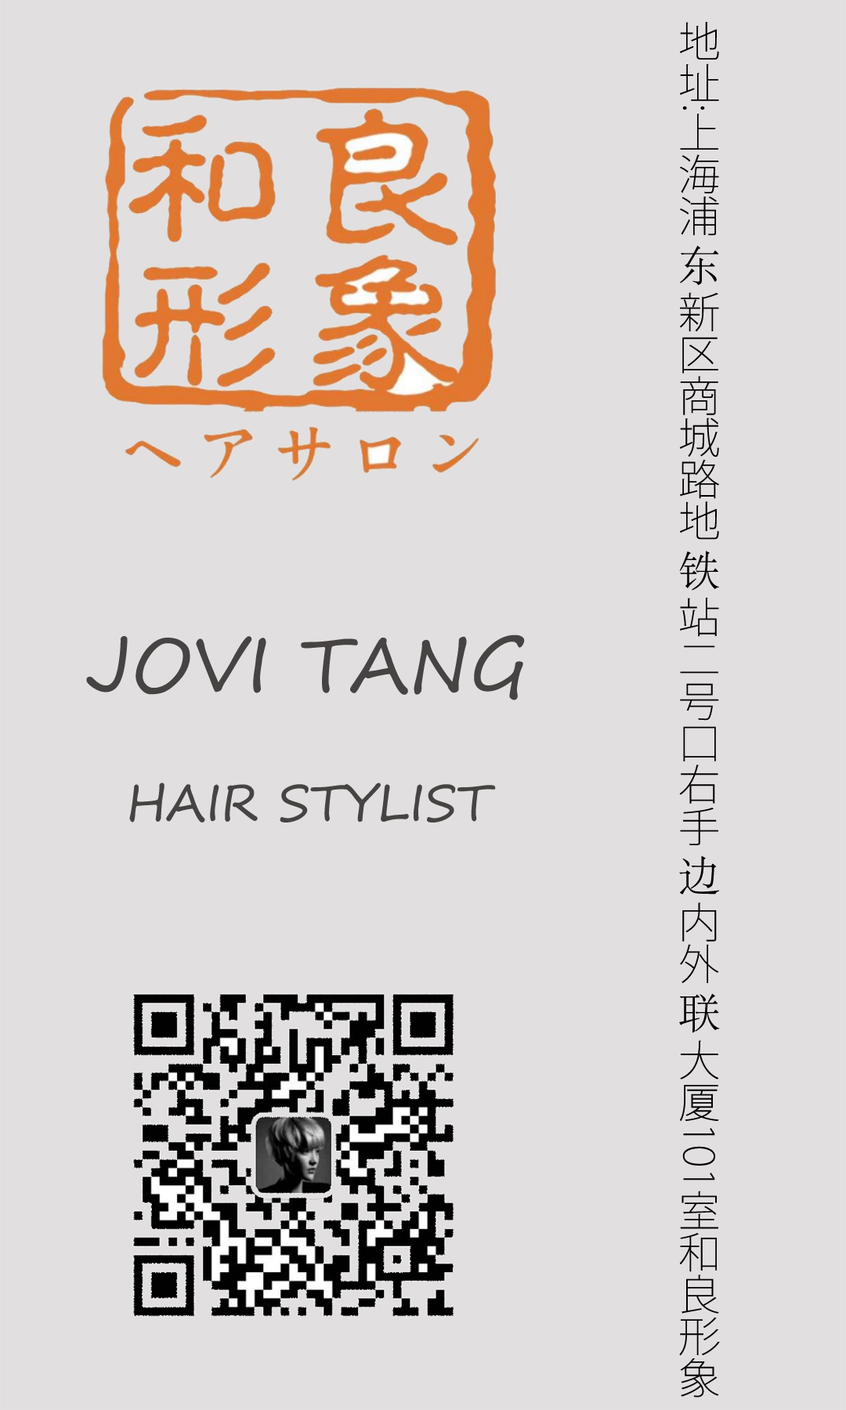
<style>
.page{position:relative;width:846px;height:1410px;background:#e1dfdf}
.page>*{position:absolute;margin:0}
.t1{font:41.8px "KozGoPr6N-ExtraLight";color:#000000}
.t2{font:41.8px "STSong";color:#000000}
.t3{font:75.2px "SegoePrint";color:#464342}
.t4{font:50.1px "SegoePrint";color:#464342}
</style>
<div class="page">
<p class="t1" style="left:679px;top:22px;width:41px;height:1375px">地址:上海浦<span class="t2">东</span>新区商城路地<span class="t2">铁</span>站二号口右手<span class="t2">边</span>内外<span class="t2">联</span>大厦101室和良形象</p>
<p class="t3" style="left:86px;top:634px;width:439px;height:66px">JOVI TANG</p>
<p class="t4" style="left:129px;top:782px;width:367px;height:40px">HAIR STYLIST</p>
</div>
